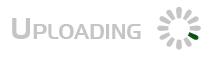
<style>
.page{position:relative;width:214px;height:57px;background:#ffffff}
.page>*{position:absolute;margin:0}
.t1{font:21px "Slicker";color:#c5c5c5}
.t2{font:30px "Slicker";color:#c5c5c5}
</style>
<div class="page">
<p class="t1" style="left:12px;top:18px;width:129px;height:21px"><span class="t2">U</span>PLOADING</p>
</div>
